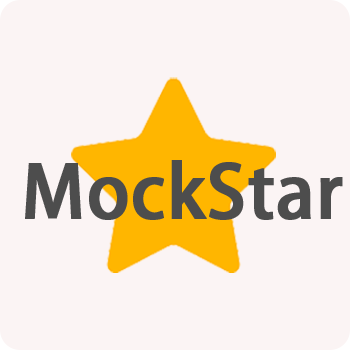
<style>
.page{position:relative;width:350px;height:350px;background:#fbf4f4}
.page>*{position:absolute;margin:0}
.t1{font:72px "AdobeHeitiStd-Regular";color:#4d4d4d;font-weight:bold}
</style>
<div class="page">
<p class="t1" style="left:25px;top:160px;width:318px;height:60px">MockStar</p>
</div>
